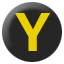
<style>
.page{position:relative;width:64px;height:64px;background:#262626}
.page>*{position:absolute;margin:0}
.t1{font:50px "Meiryo-Bold";color:#e9d000}
</style>
<div class="page">
<p class="t1" style="left:15px;top:13px;width:35px;height:38px">Y</p>
</div>
